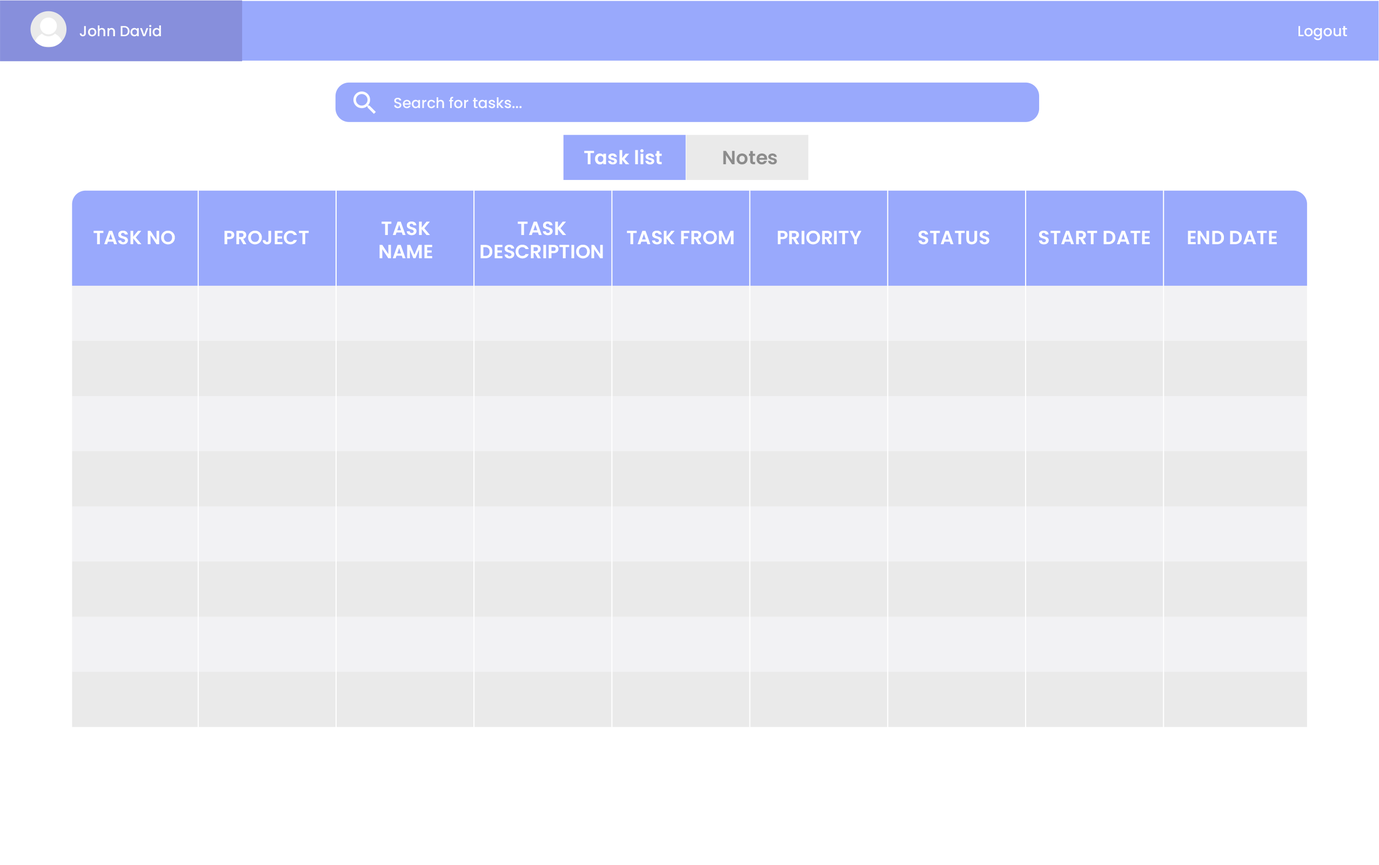
<style>
.page{position:relative;width:1379px;height:865px;background:#ffffff}
.page>*{position:absolute;margin:0}
.t1{font:14.6px "Poppins-Medium";color:#ffffff}
.t2{font:14.6px "Poppins-Medium";color:#fafbff}
.t3{font:19.1px "Poppins-SemiBold";color:#ffffff}
.t4{font:19.1px "Poppins-SemiBold";color:#8c8c8c}
</style>
<div class="page">
<p class="t1" style="left:79px;top:25px;width:82px;height:12px">John David</p>
<p class="t1" style="left:1298px;top:26px;width:49px;height:15px">Logout</p>
<p class="t2" style="left:394px;top:97px;width:128px;height:12px">Search for tasks...</p>
<p class="t3" style="left:584px;top:149px;width:78px;height:16px">Task list</p>
<p class="t4" style="left:723px;top:151px;width:54px;height:14px">Notes</p>
<p class="t3" style="left:379px;top:221px;width:53px;height:37px;text-align:center">TASK<br>NAME</p>
<p class="t3" style="left:480px;top:221px;width:123px;height:38px;text-align:center">TASK<br>DESCRIPTION</p>
<p class="t3" style="left:93px;top:231px;width:82px;height:14px">TASK NO</p>
<p class="t3" style="left:224px;top:231px;width:85px;height:14px">PROJECT</p>
<p class="t3" style="left:627px;top:231px;width:107px;height:14px">TASK FROM</p>
<p class="t3" style="left:777px;top:231px;width:84px;height:14px">PRIORITY</p>
<p class="t3" style="left:918px;top:231px;width:71px;height:14px">STATUS</p>
<p class="t3" style="left:1038px;top:231px;width:112px;height:14px">START DATE</p>
<p class="t3" style="left:1187px;top:231px;width:90px;height:13px">END DATE</p>
</div>
